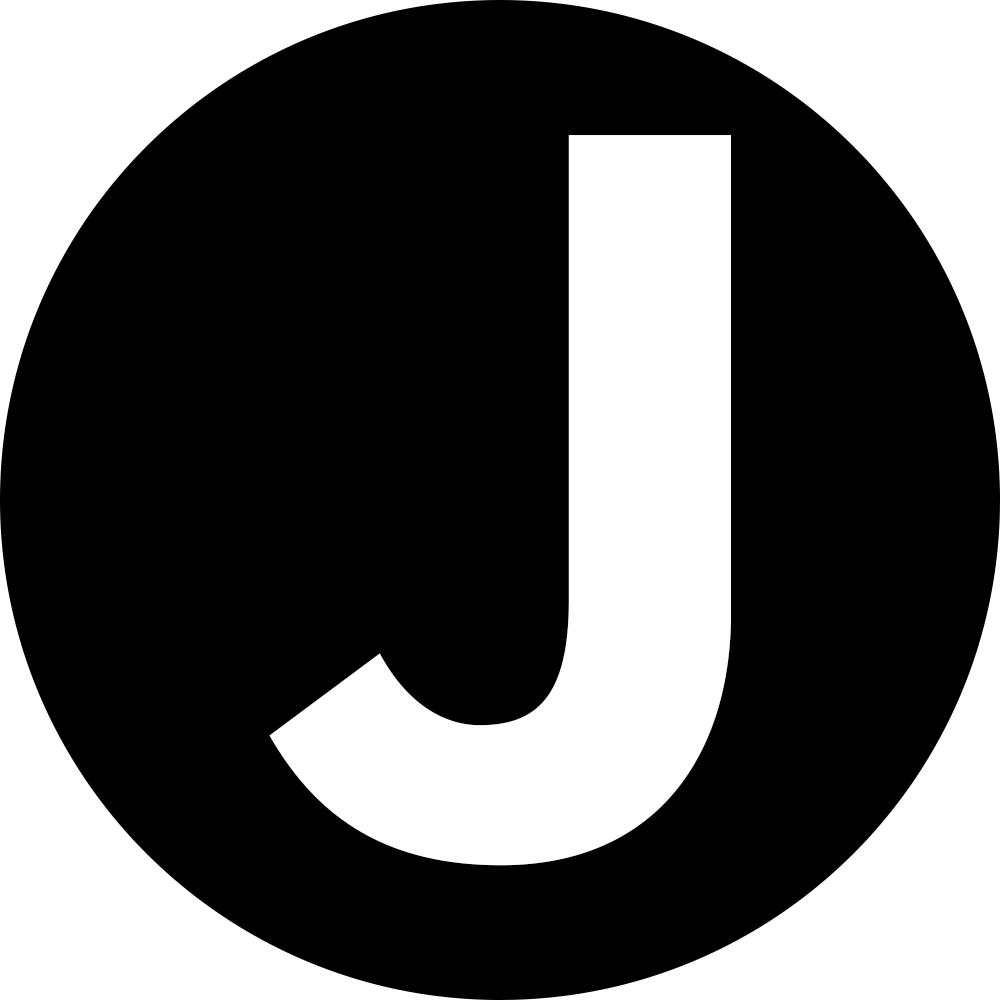
<style>
.page{position:relative;width:1000px;height:1000px;background:#000000}
.page>*{position:absolute;margin:0}
.t1{font:1100px "SourceSansRoman-Bold";color:#ffffff}
</style>
<div class="page">
<p class="t1" style="left:269px;top:135px;width:462px;height:731px">J</p>
</div>
